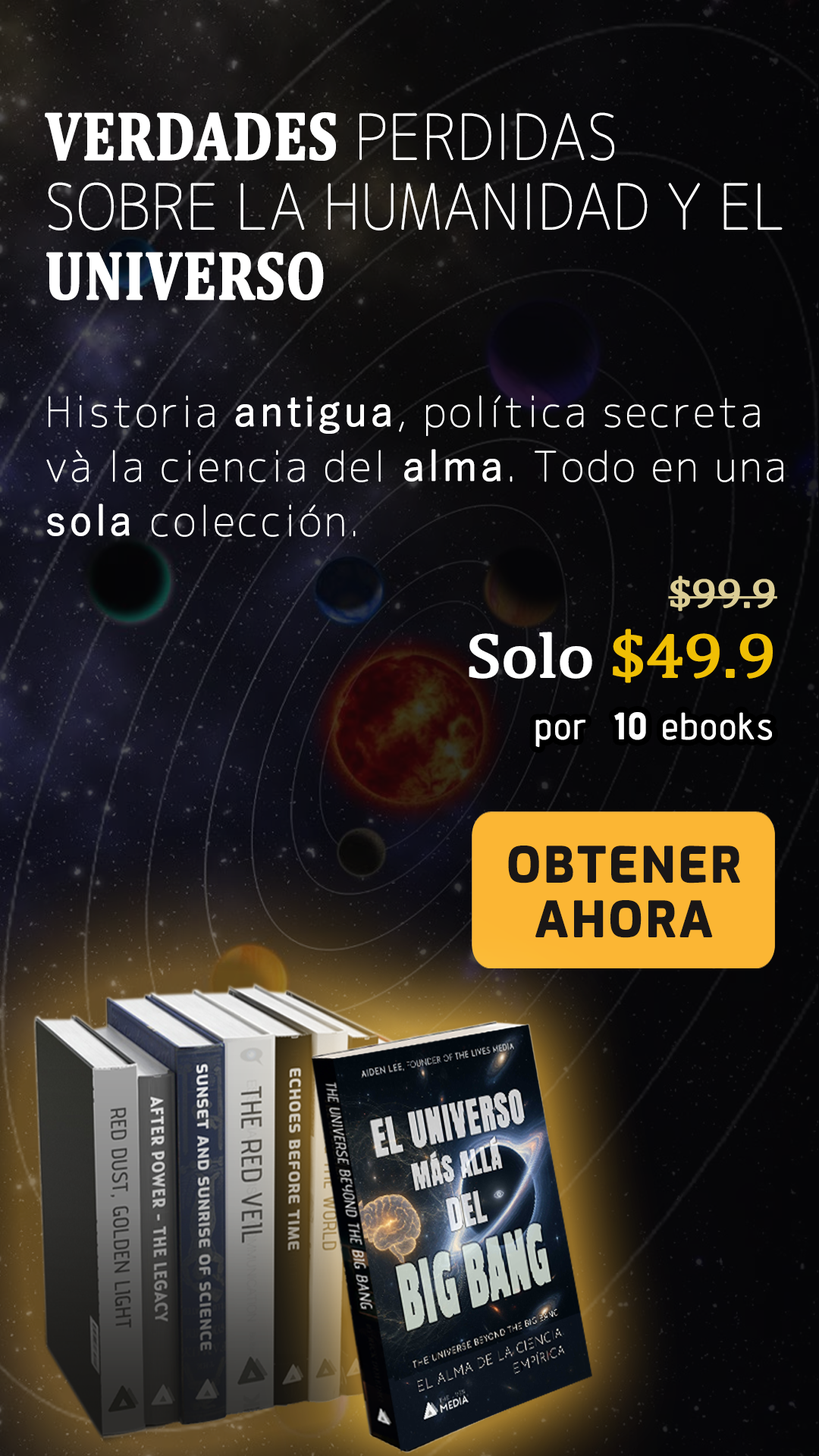
<style>
.page{position:relative;width:819px;height:1456px}
.page>*{position:absolute;margin:0}
.t1{font:62.2px/69.8px "Chogokuboso-Gothic";letter-spacing:0.005em;color:#ffffff;font-weight:bold;scale:0.9 1}
.t2{font:68.4px/69.8px "Cambria-Bold";letter-spacing:0.005em;color:#ffffff;font-weight:bold;scale:0.82 1}
.t3{font:40.9px/54.6px "Chogokuboso-Gothic";letter-spacing:0.05em;color:#ffffff;font-weight:bold}
.t4{font:40.9px/54.6px "YuGothic-Regular";letter-spacing:0.05em;color:#ffffff;font-weight:bold}
.t5{font:40.9px/69.8px "Cambria";letter-spacing:-0.025em;color:#dbcd95;font-weight:bold;scale:1.11 1}
.t6{font:62.8px/69.8px "Cambria";letter-spacing:-0.025em;color:#ffffff;font-weight:bold;scale:1.11 1}
.t7{font:62.8px/69.8px "Cambria";letter-spacing:-0.025em;color:#efbf04;font-weight:bold;scale:1.11 1}
.t8{font:36.4px "AdventPro-Regular";letter-spacing:0.05em;color:#ffffff;font-weight:bold}
.t9{font:36.4px "AdventPro-Bold";letter-spacing:0.05em;color:#ffffff;font-weight:bold}
.t10{font:47.8px/54.6px "Exo-Bold";letter-spacing:0.05em;color:#191616;font-weight:bold}
</style>
<div class="page">
<p class="t1" style="left:45px;top:112px;width:738px;height:188px"><span class="t2">VERDADES</span> PERDIDAS SOBRE LA HUMANIDAD Y EL <span class="t2">UNIVERSO</span></p>
<p class="t3" style="left:46px;top:395px;width:737px;height:142px">Historia <span class="t4">antigua</span>, política secreta và la ciencia del <span class="t4">alma</span>. Todo en una <span class="t4">sola </span>colección.</p>
<p class="t5" style="left:469px;top:576px;width:308px;height:107px;text-align:right">$99.9 <br><span class="t6">Solo</span><span class="t7"> $49.9</span></p>
<p class="t8" style="left:535px;top:712px;width:237px;height:36px">por  <span class="t9">10</span> ebooks</p>
<p class="t10" style="left:508px;top:846px;width:232px;height:92px;text-align:center">OBTENER AHORA</p>
</div>
